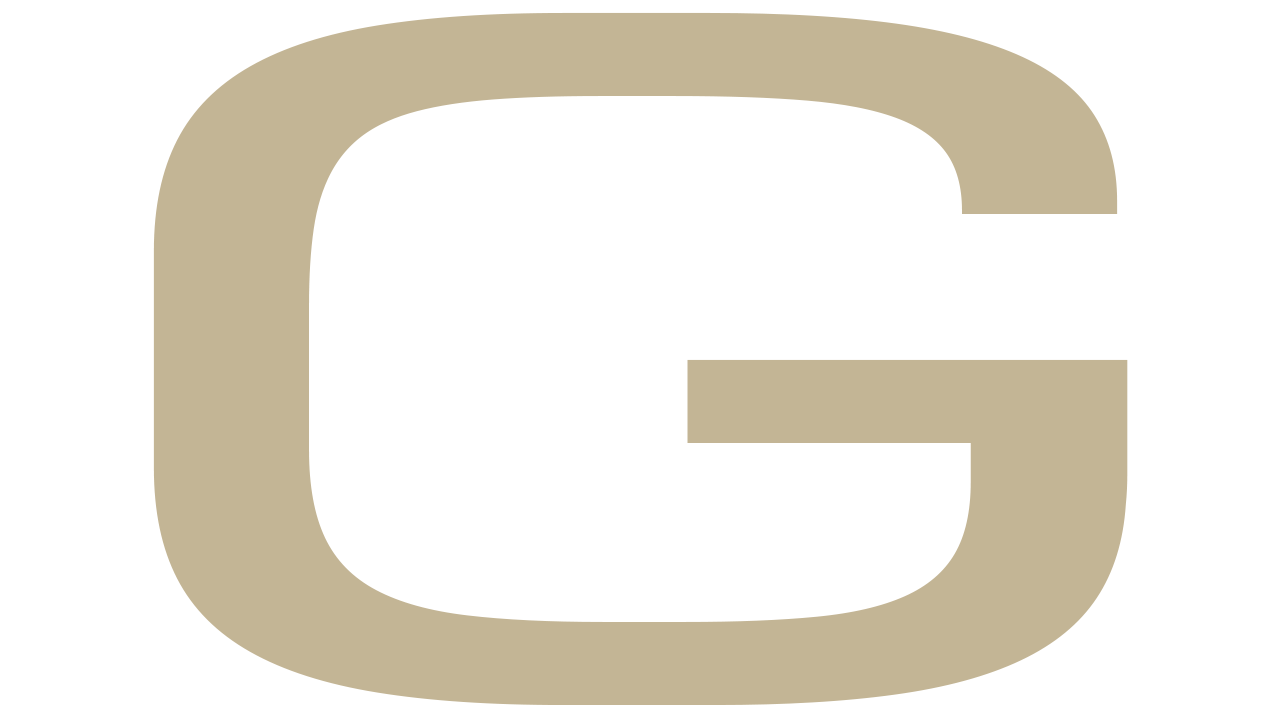
<style>
.page{position:relative;width:1280px;height:720px;background:#ffffff}
.page>*{position:absolute;margin:0}
.t1{font:930.1px "Moire";color:#c3b595;scale:1.6 1}
</style>
<div class="page">
<p class="t1" style="left:153px;top:12px;width:975px;height:693px">G</p>
</div>
